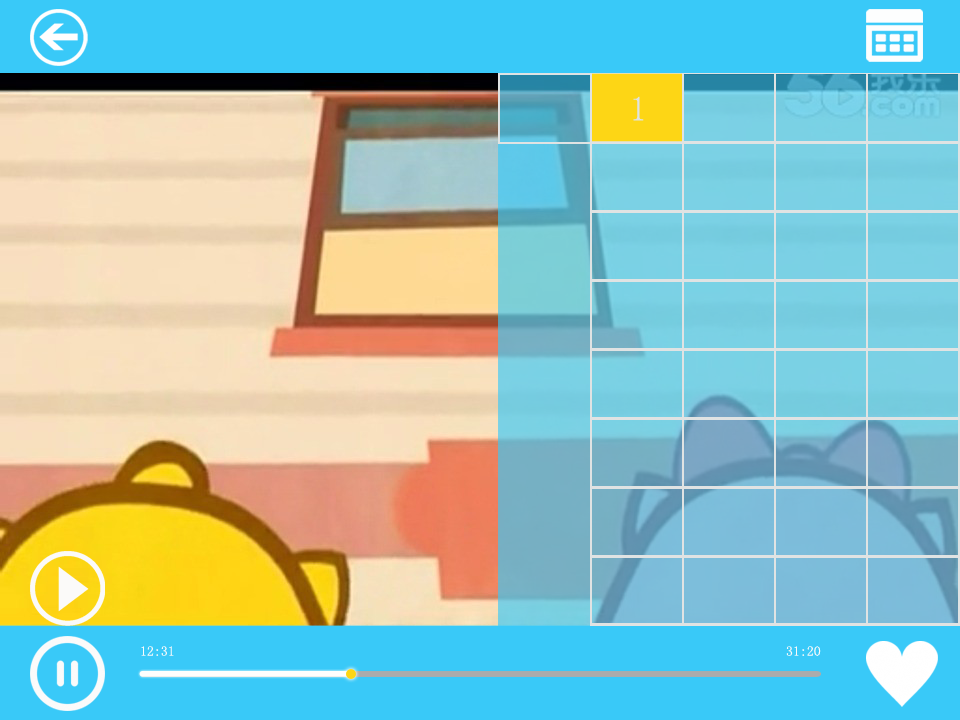
<style>
.page{position:relative;width:960px;height:720px}
.page>*{position:absolute;margin:0}
.t1{font:34.8px "SimSun";color:#dfe3e3;scale:0.94 1}
.t2{font:13.9px "SimSun";color:#fafafa}
</style>
<div class="page">
<p class="t1" style="left:633px;top:96px;width:11px;height:25px">1</p>
<p class="t2" style="left:141px;top:646px;width:33px;height:10px">12:31</p>
<p class="t2" style="left:786px;top:646px;width:35px;height:10px">31:20</p>
</div>
